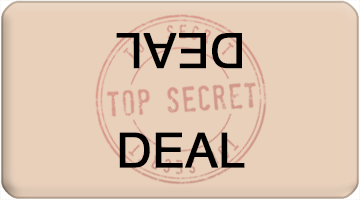
<style>
.page{position:relative;width:360px;height:200px;background:#e8d0bb}
.page>*{position:absolute;margin:0}
.t1{font:48px "ArialMT";color:#000000;font-weight:bold}
</style>
<div class="page">
<p class="t1" style="left:116px;top:33px;width:126px;height:36px;rotate:180deg">DEAL</p>
<p class="t1" style="left:119px;top:132px;width:126px;height:36px">DEAL</p>
</div>
